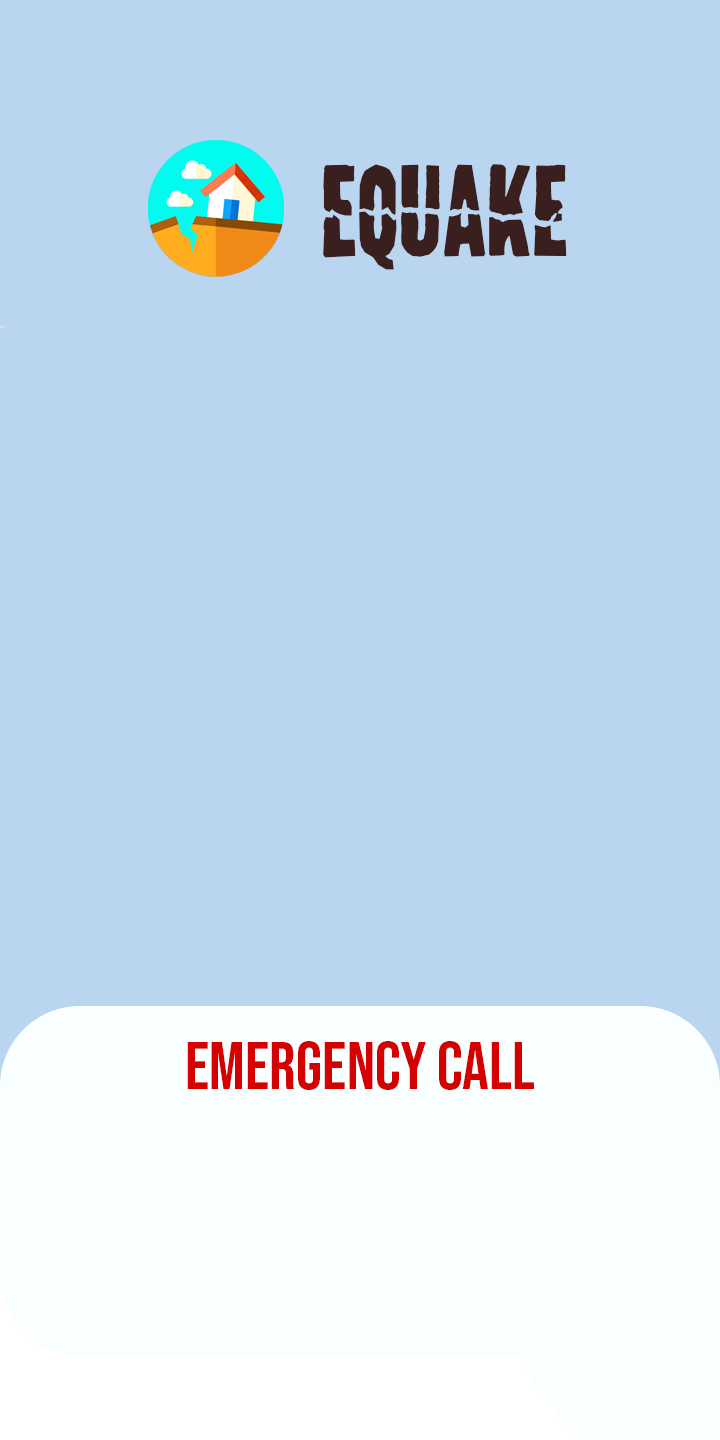
<style>
.page{position:relative;width:720px;height:1440px;background:#bad5f0}
.page>*{position:absolute;margin:0}
.t1{font:111.1px "LandSpeedRecord";color:#3a1f1f}
.t2{font:66.7px "BebasNeue-Regular";color:#d50000}
</style>
<div class="page">
<p class="t1" style="left:323px;top:164px;width:244px;height:106px">eQUAKE</p>
<p class="t2" style="left:187px;top:1041px;width:347px;height:49px">EMERGENCY CALL</p>
</div>
